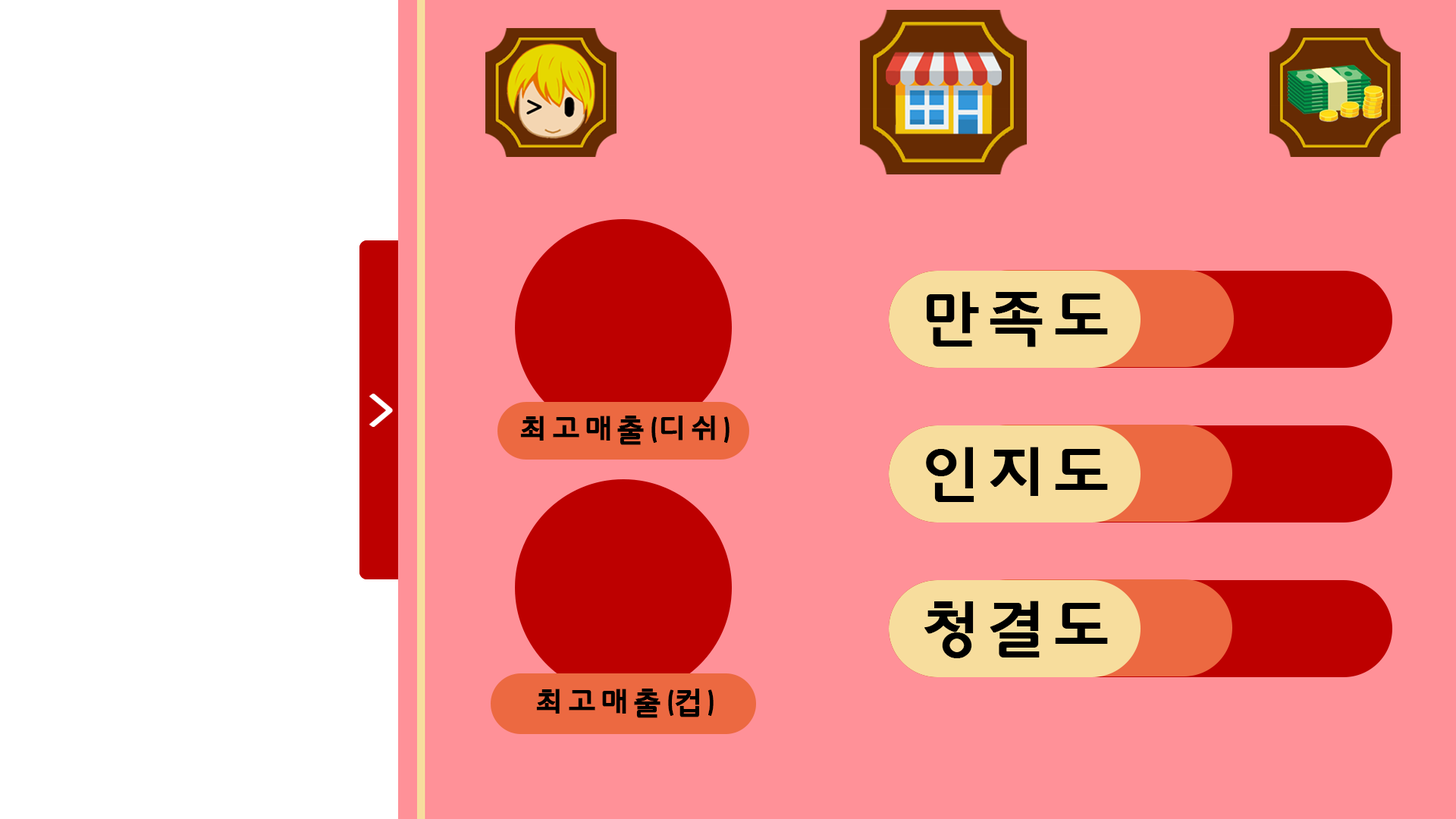
<style>
.page{position:relative;width:1456px;height:819px;background:#ff9198}
.page>*{position:absolute;margin:0}
.t1{font:63.2px "HYkanB";color:#000000;font-weight:bold}
.t2{font:31.6px "HYkanB";color:#000000;font-weight:bold}
</style>
<div class="page">
<p class="t1" style="left:927px;top:291px;width:181px;height:56px">만족도</p>
<p class="t2" style="left:520px;top:416px;width:210px;height:29px">최고매출(디쉬)</p>
<p class="t1" style="left:926px;top:447px;width:182px;height:55px">인지도</p>
<p class="t1" style="left:924px;top:601px;width:184px;height:57px">청결도</p>
<p class="t2" style="left:536px;top:689px;width:178px;height:29px">최고매출(컵)</p>
</div>
